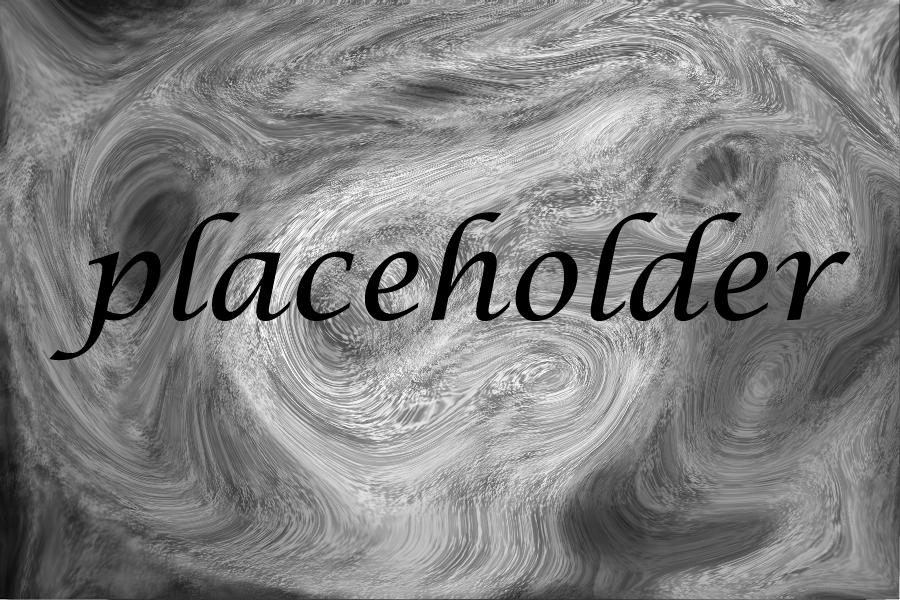
<style>
.page{position:relative;width:900px;height:600px}
.page>*{position:absolute;margin:0}
.t1{font:125px "LucidaCalligraphy-Italic";color:#000000}
</style>
<div class="page">
<p class="t1" style="left:49px;top:212px;width:802px;height:149px">placeholder</p>
</div>
